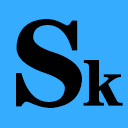
<style>
.page{position:relative;width:128px;height:128px;background:#36acff}
.page>*{position:absolute;margin:0}
.t1{font:125px "FZCHSJW--GB1-0";color:#000000}
.t2{font:66.7px "FZCHSJW--GB1-0";color:#000000}
</style>
<div class="page">
<p class="t1" style="left:16px;top:19px;width:66px;height:89px">S</p>
<p class="t2" style="left:83px;top:60px;width:40px;height:46px">k</p>
</div>
